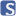
<style>
.page{position:relative;width:16px;height:16px;background:#45619d}
.page>*{position:absolute;margin:0}
.t1{font:17.8px "SourceSansPro-Regular";color:#ffffff;font-weight:bold}
</style>
<div class="page">
<p class="t1" style="left:5px;top:3px;width:10px;height:13px">S</p>
</div>
